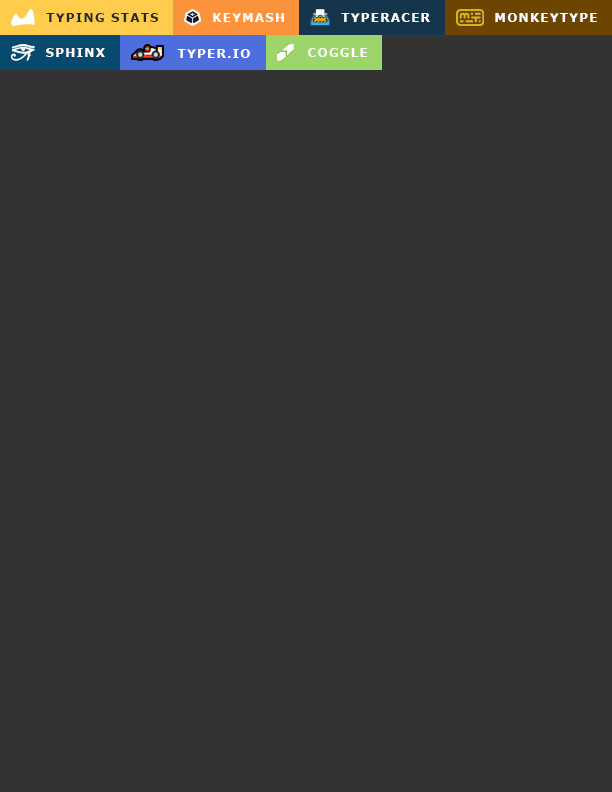
<style>
.page{position:relative;width:612px;height:792px;background:#333333}
.page>*{position:absolute;margin:0}
.t1{font:12px "Verdana-Bold";letter-spacing:0.1em;color:#282828}
.t2{font:12px "Verdana-Bold";letter-spacing:0.1em;color:#ffffff}
</style>
<div class="page">
<p class="t1" style="left:46px;top:13px;width:113px;height:9px">TYPING STATS</p>
<p class="t2" style="left:213px;top:13px;width:72px;height:9px">KEYMASH</p>
<p class="t2" style="left:341px;top:13px;width:89px;height:9px">TYPERACER</p>
<p class="t2" style="left:495px;top:13px;width:102px;height:9px">MONKEYTYPE</p>
<p class="t2" style="left:46px;top:48px;width:59px;height:9px">SPHINX</p>
<p class="t2" style="left:177px;top:49px;width:73px;height:9px">TYPER.IO</p>
<p class="t2" style="left:308px;top:48px;width:59px;height:9px">COGGLE</p>
</div>
